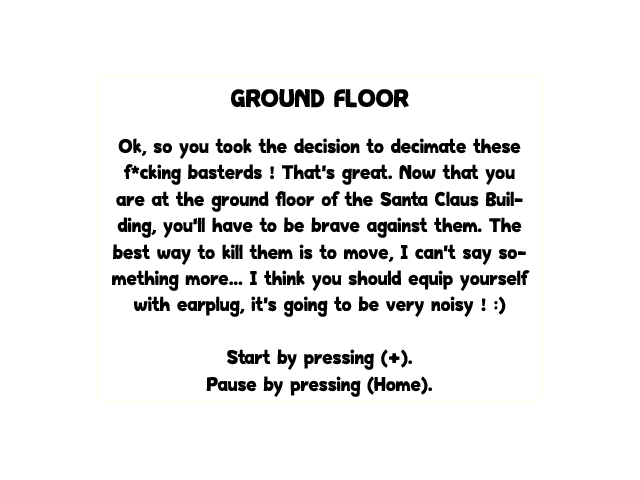
<style>
.page{position:relative;width:640px;height:480px;background:#ffffff}
.page>*{position:absolute;margin:0}
.t1{font:22px "HappyHell";color:#000000}
.t2{font:28px "HappyHell";color:#000000}
</style>
<div class="page">
<p class="t1" style="left:112px;top:89px;width:418px;height:308px;text-align:center"><span class="t2">GROUND FLOOR<br><br></span>Ok, so you took the decision to decimate these f*cking basterds ! That's great. Now that you are at the ground floor of the Santa Claus Building, you'll have to be brave against them. The best way to kill them is to move, I can't say something more... I think you should equip yourself with earplug, it's going to be very noisy ! :)<br><br>Start by pressing (+).<br>Pause by pressing (Home).</p>
</div>
